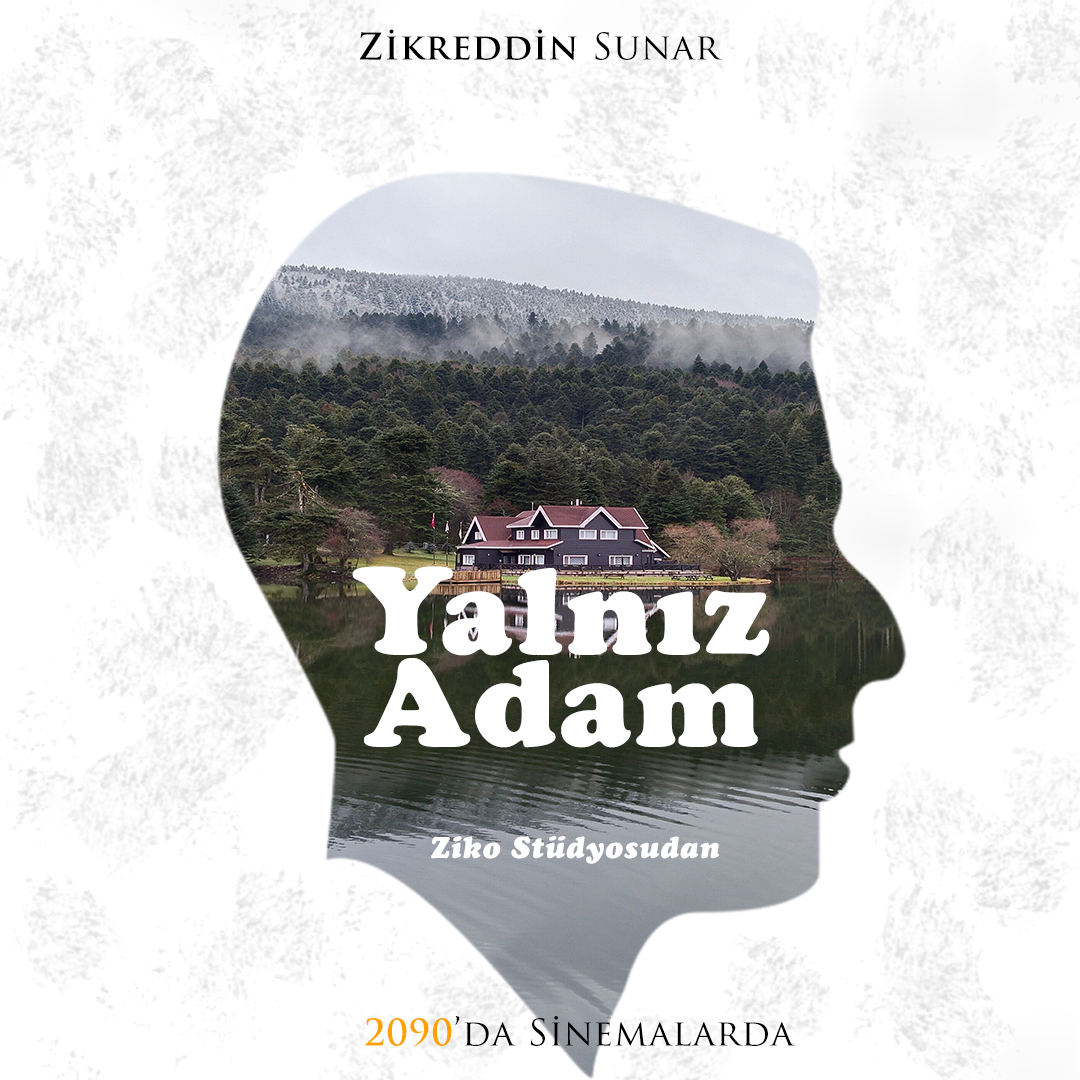
<style>
.page{position:relative;width:1080px;height:1080px;background:#ffffff}
.page>*{position:absolute;margin:0}
.t1{font:36px "TrajanPro-Bold";letter-spacing:0.025em;color:#000000}
.t2{font:36px "TrajanPro-Regular";letter-spacing:0.025em;color:#000000}
.t3{font:122px/72px "CooperBlackStd";letter-spacing:0.025em;color:#ffffff}
.t4{font:30px "CooperBlackStd-Italic";letter-spacing:0.025em;color:#ffffff}
.t5{font:36px "TrajanPro-Bold";letter-spacing:0.025em;color:#ffa200}
</style>
<div class="page">
<p class="t1" style="left:359px;top:29px;width:363px;height:31px">Zikreddin<span class="t2"> Sunar</span></p>
<p class="t3" style="left:352px;top:566px;width:418px;height:182px;text-align:center">Yalnız<br>Adam</p>
<p class="t4" style="left:431px;top:836px;width:288px;height:28px">Ziko Stüdyosudan</p>
<p class="t2" style="left:365px;top:1016px;width:430px;height:31px"><span class="t5">2090</span>’da Sinemalarda</p>
</div>
